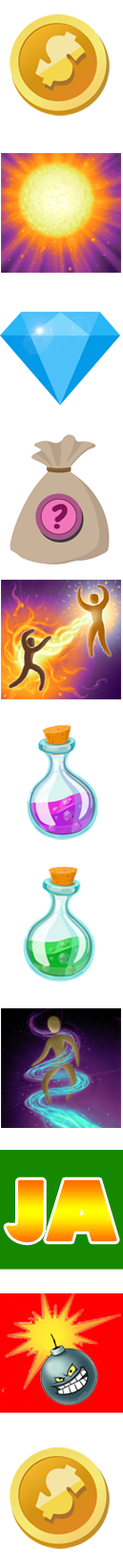
<style>
.page{position:relative;width:123px;height:1568px;background:#ffffff}
.page>*{position:absolute;margin:0}
.t1{font:79.2px "GillSans-UltraBoldCondensed";font-weight:bold;scale:1.27 1}
</style>
<div class="page">
<p class="t1" style="left:6px;top:1179px;width:111px;height:64px">JA</p>
</div>
